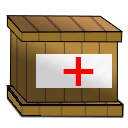
<style>
.page{position:relative;width:128px;height:128px;background:#ffffff}
.page>*{position:absolute;margin:0}
.t1{font:62.7px "ArialMT";letter-spacing:0.05em;color:#ff0000}
</style>
<div class="page">
<p class="t1" style="left:63px;top:57px;width:31px;height:29px">+</p>
</div>
